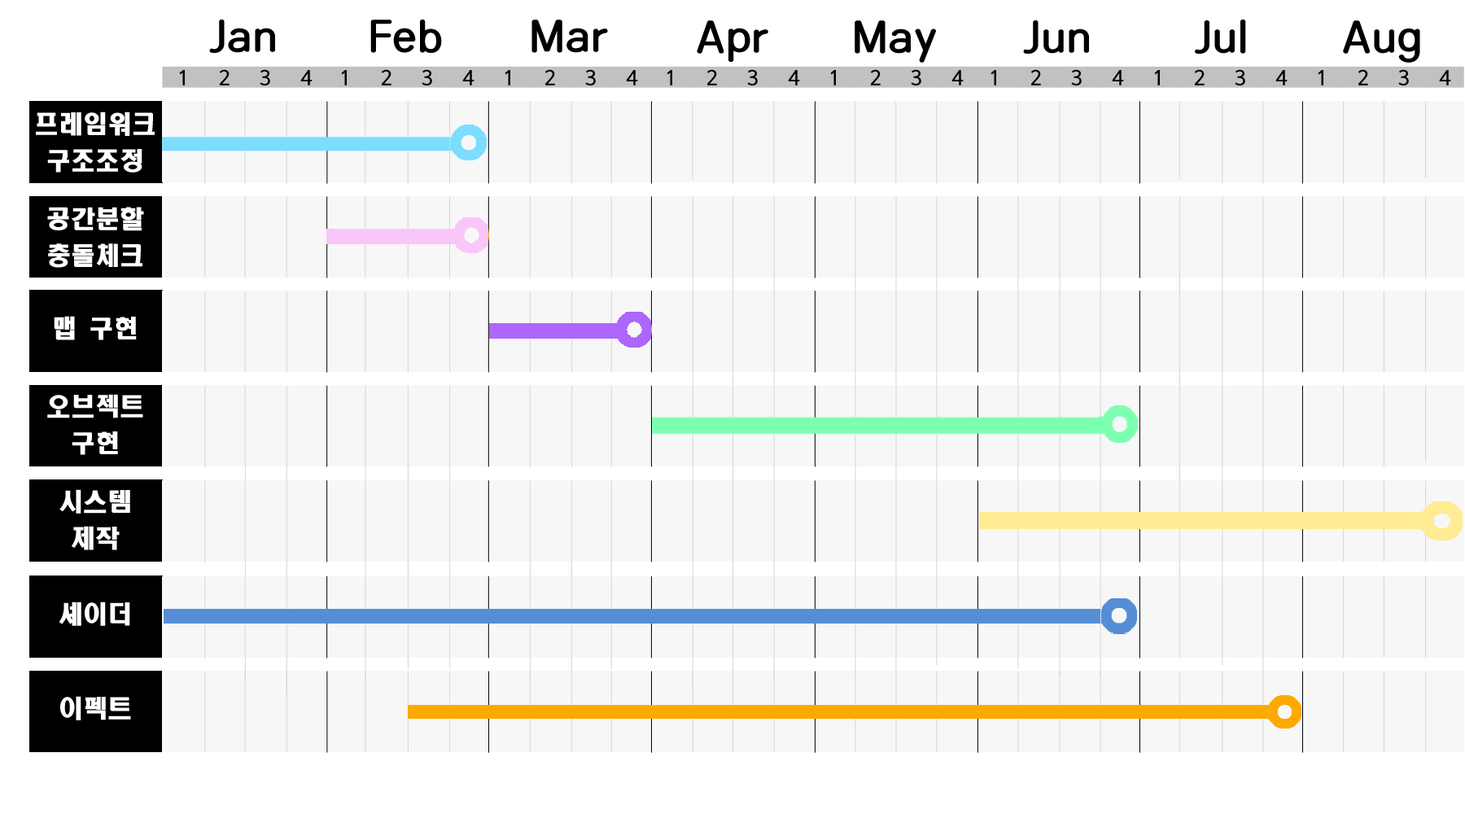
<style>
.page{position:relative;width:1465px;height:814px;background:#f7f7f7}
.page>*{position:absolute;margin:0}
.t1{font:48.8px "DXMgoRB-KSCpc-EUC-H";color:#000000}
.t2{font:19.5px "HaanYoonGothic760";color:#000000}
.t3{font:24.4px/36.6px "HeadlineR-HM";color:#ffffff}
.t4{font:24.4px "HeadlineR-HM";color:#ffffff}
</style>
<div class="page">
<p class="t1" style="left:209px;top:20px;width:66px;height:33px">Jan</p>
<p class="t1" style="left:370px;top:20px;width:72px;height:33px">Feb</p>
<p class="t1" style="left:531px;top:20px;width:77px;height:33px">Mar</p>
<p class="t1" style="left:697px;top:20px;width:71px;height:42px">Apr</p>
<p class="t1" style="left:855px;top:20px;width:81px;height:43px">May</p>
<p class="t1" style="left:1023px;top:20px;width:66px;height:34px">Jun</p>
<p class="t1" style="left:1195px;top:20px;width:51px;height:34px">Jul</p>
<p class="t1" style="left:1343px;top:20px;width:77px;height:43px">Aug</p>
<p class="t2" style="left:179px;top:70px;width:6px;height:15px">1</p>
<p class="t2" style="left:219px;top:69px;width:11px;height:16px">2</p>
<p class="t2" style="left:260px;top:69px;width:10px;height:16px">3</p>
<p class="t2" style="left:300px;top:70px;width:13px;height:15px">4</p>
<p class="t2" style="left:341px;top:70px;width:6px;height:15px">1</p>
<p class="t2" style="left:381px;top:69px;width:10px;height:16px">2</p>
<p class="t2" style="left:422px;top:69px;width:10px;height:16px">3</p>
<p class="t2" style="left:462px;top:70px;width:13px;height:15px">4</p>
<p class="t2" style="left:505px;top:70px;width:5px;height:15px">1</p>
<p class="t2" style="left:545px;top:69px;width:10px;height:16px">2</p>
<p class="t2" style="left:585px;top:69px;width:11px;height:16px">3</p>
<p class="t2" style="left:626px;top:70px;width:12px;height:15px">4</p>
<p class="t2" style="left:667px;top:70px;width:5px;height:15px">1</p>
<p class="t2" style="left:706px;top:69px;width:11px;height:16px">2</p>
<p class="t2" style="left:747px;top:69px;width:11px;height:16px">3</p>
<p class="t2" style="left:788px;top:70px;width:12px;height:15px">4</p>
<p class="t2" style="left:830px;top:70px;width:6px;height:15px">1</p>
<p class="t2" style="left:870px;top:69px;width:11px;height:16px">2</p>
<p class="t2" style="left:911px;top:69px;width:10px;height:16px">3</p>
<p class="t2" style="left:951px;top:70px;width:13px;height:15px">4</p>
<p class="t2" style="left:991px;top:70px;width:5px;height:15px">1</p>
<p class="t2" style="left:1030px;top:69px;width:11px;height:16px">2</p>
<p class="t2" style="left:1071px;top:69px;width:11px;height:16px">3</p>
<p class="t2" style="left:1112px;top:70px;width:12px;height:15px">4</p>
<p class="t2" style="left:1154px;top:70px;width:6px;height:15px">1</p>
<p class="t2" style="left:1194px;top:69px;width:11px;height:16px">2</p>
<p class="t2" style="left:1235px;top:69px;width:10px;height:16px">3</p>
<p class="t2" style="left:1275px;top:70px;width:13px;height:15px">4</p>
<p class="t2" style="left:1318px;top:70px;width:5px;height:15px">1</p>
<p class="t2" style="left:1358px;top:69px;width:10px;height:16px">2</p>
<p class="t2" style="left:1398px;top:69px;width:11px;height:16px">3</p>
<p class="t2" style="left:1439px;top:70px;width:12px;height:15px">4</p>
<p class="t3" style="left:36px;top:112px;width:119px;height:61px;text-align:center">프레임워크<br>구조조정</p>
<p class="t3" style="left:47px;top:207px;width:97px;height:61px;text-align:center">공간분할<br>충돌체크</p>
<p class="t4" style="left:54px;top:316px;width:83px;height:24px">맵 구현</p>
<p class="t3" style="left:47px;top:394px;width:96px;height:61px;text-align:center">오브젝트 구현</p>
<p class="t3" style="left:59px;top:489px;width:71px;height:61px;text-align:center">시스템<br>제작</p>
<p class="t4" style="left:59px;top:601px;width:71px;height:25px">셰이더</p>
<p class="t4" style="left:60px;top:696px;width:71px;height:24px">이펙트</p>
</div>
